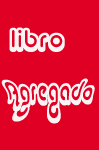
<style>
.page{position:relative;width:99px;height:150px;background:#df0024}
.page>*{position:absolute;margin:0}
.t1{font:25px "AlbaSuper";color:#f9f4f4;font-weight:bold}
.t2{font:25px "AlbaSuper";color:#f9f4f4}
</style>
<div class="page">
<p class="t1" style="left:9px;top:27px;width:56px;height:25px">libro</p>
<p class="t2" style="left:1px;top:78px;width:94px;height:46px">Agregado</p>
</div>
